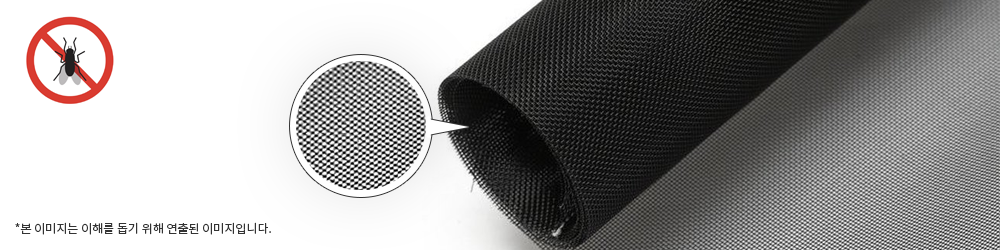
<style>
.page{position:relative;width:1000px;height:250px;background:#ffffff}
.page>*{position:absolute;margin:0}
.t1{font:12px "NotoSansKR-Regular";color:#333333}
</style>
<div class="page">
<p class="t1" style="left:15px;top:222px;width:256px;height:13px">*본 이미지는 이해를 돕기 위해 연출된 이미지입니다.</p>
</div>
